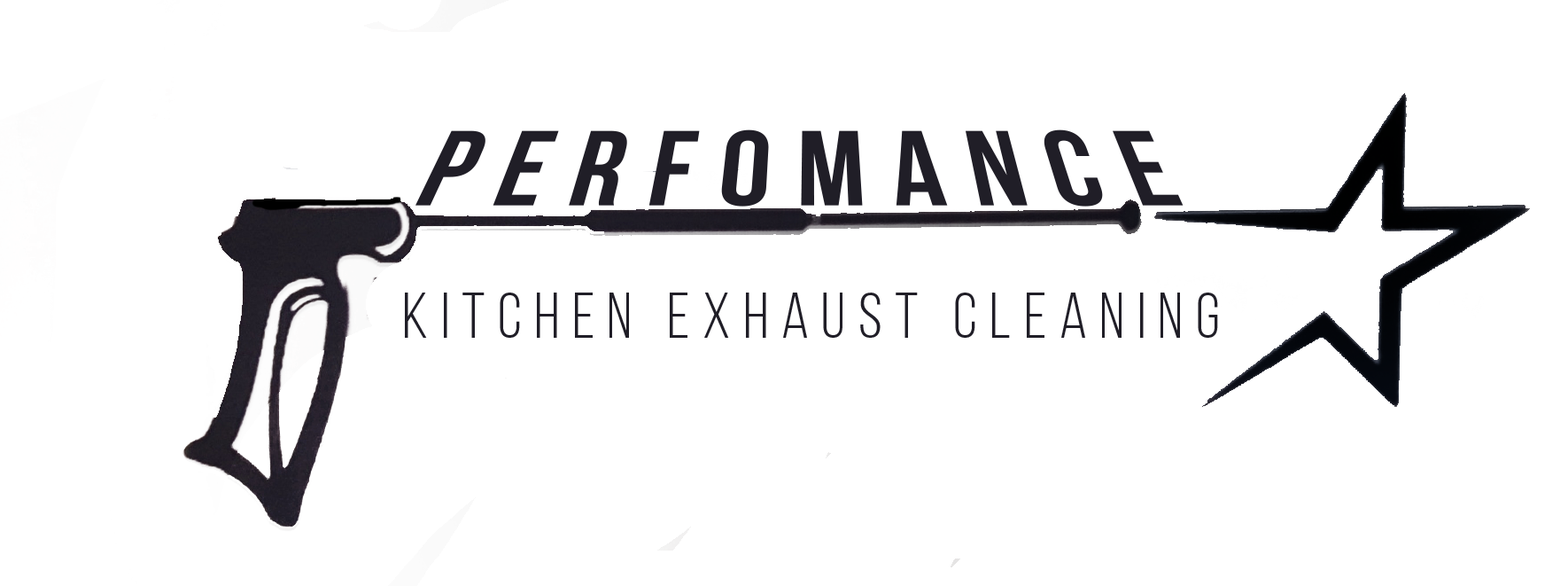
<style>
.page{position:relative;width:1568px;height:586px;background:#ffffff}
.page>*{position:absolute;margin:0}
.t1{font:106.3px "BebasNeueBold";letter-spacing:0.2em;color:#201e27;scale:1.2 1}
.t2{font:63.8px "BebasNeueBook";letter-spacing:0.2em;color:#201e27}
</style>
<div class="page">
<p class="t1" style="left:415px;top:129px;width:769px;height:77px">Perfomance</p>
<p class="t2" style="left:405px;top:292px;width:813px;height:46px">Kitchen Exhaust cleaning</p>
</div>
